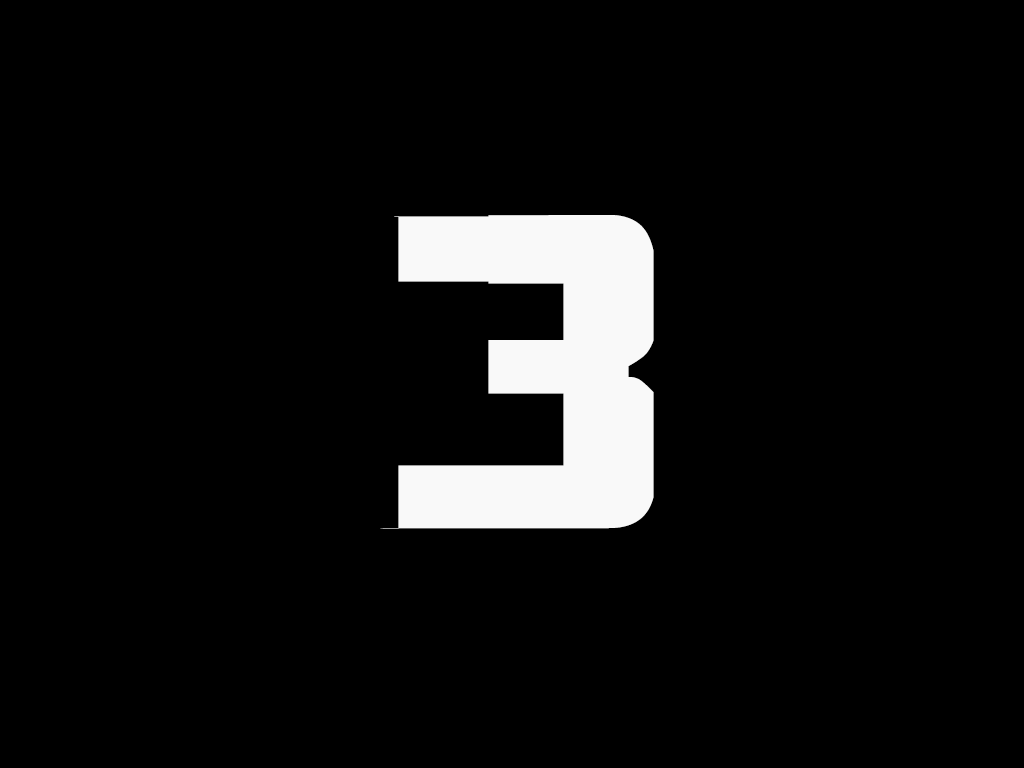
<style>
.page{position:relative;width:1024px;height:768px;background:#000000}
.page>*{position:absolute;margin:0}
.t1{font:500px "TransformersMovie";color:#f9f9f9}
</style>
<div class="page">
<p class="t1" style="left:380px;top:215px;width:274px;height:314px">3</p>
</div>
